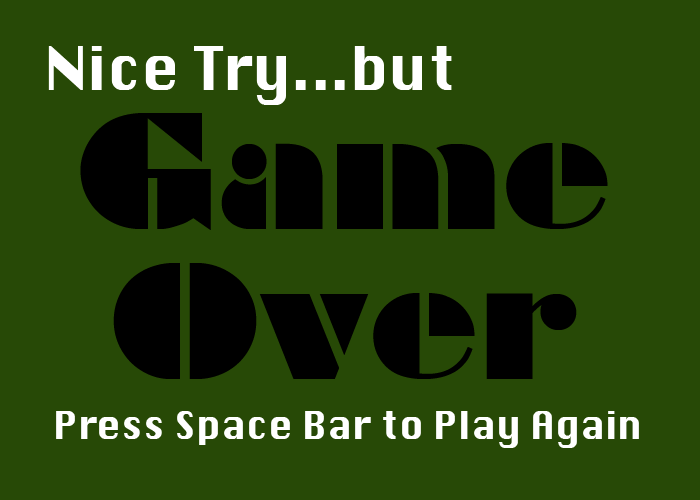
<style>
.page{position:relative;width:700px;height:500px;background:#274906}
.page>*{position:absolute;margin:0}
.t1{font:58.3px "Krungthep";color:#ffffff}
.t2{font:150px/150px "Braggadocio";color:#000000}
.t3{font:37.5px "Krungthep";color:#ffffff}
</style>
<div class="page">
<p class="t1" style="left:48px;top:46px;width:404px;height:59px">Nice Try...but</p>
<p class="t2" style="left:80px;top:113px;width:528px;height:266px;text-align:center">Game Over</p>
<p class="t3" style="left:56px;top:411px;width:583px;height:37px">Press Space Bar to Play Again</p>
</div>
